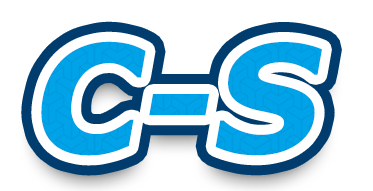
<style>
.page{position:relative;width:373px;height:191px;background:#ffffff}
.page>*{position:absolute;margin:0}
.t1{font:150px "Verdana-Bold";color:#00a2e8;font-style:italic}
</style>
<div class="page">
<p class="t1" style="left:41px;top:41px;width:281px;height:115px">C-S</p>
<p class="t1" style="left:41px;top:41px;width:281px;height:115px">C-S</p>
</div>
